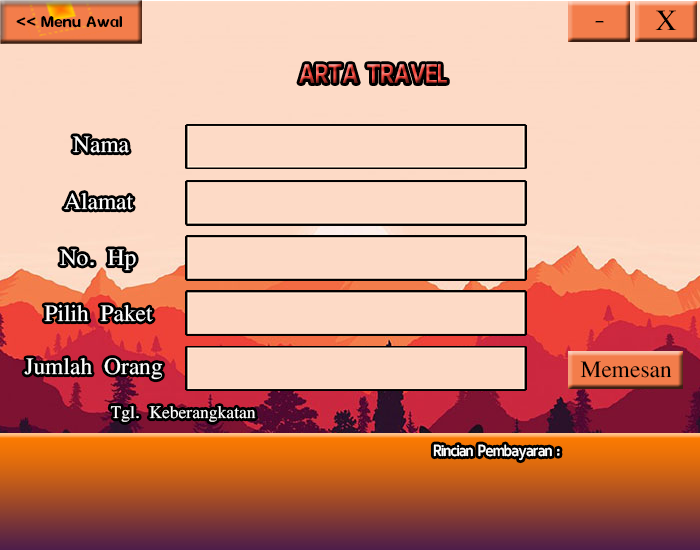
<style>
.page{position:relative;width:700px;height:550px;background:#fddac6}
.page>*{position:absolute;margin:0}
.t1{font:18px "Dyuthi-Regular";color:#000000}
.t2{font:30px "aakar-medium";color:#000000}
.t3{font:30px "Keraleeyam-Regular"}
.t4{font:24px "aakar-medium";color:#ffffff}
.t5{font:24px "aakar-medium";color:#000000}
.t6{font:18px "aakar-medium";color:#ffffff}
.t7{font:18px "Keraleeyam-Regular";color:#ffffff}
</style>
<div class="page">
<p class="t1" style="left:16px;top:16px;width:106px;height:12px">&lt;&lt; Menu Awal</p>
<p class="t2" style="left:655px;top:10px;width:22px;height:20px">X</p>
<p class="t2" style="left:595px;top:21px;width:9px;height:2px">-</p>
<p class="t3" style="left:299px;top:64px;width:148px;height:19px">ARTA TRAVEL</p>
<p class="t4" style="left:73px;top:136px;width:56px;height:17px">Nama</p>
<p class="t4" style="left:64px;top:193px;width:69px;height:17px">Alamat</p>
<p class="t4" style="left:60px;top:249px;width:76px;height:22px">No. Hp</p>
<p class="t4" style="left:44px;top:304px;width:109px;height:18px">Pilih Paket</p>
<p class="t4" style="left:24px;top:358px;width:139px;height:22px">Jumlah Orang</p>
<p class="t5" style="left:580px;top:361px;width:92px;height:17px">Memesan</p>
<p class="t6" style="left:110px;top:406px;width:146px;height:16px">Tgl. Keberangkatan</p>
<p class="t7" style="left:433px;top:444px;width:127px;height:17px">Rincian Pembayaran :</p>
</div>
